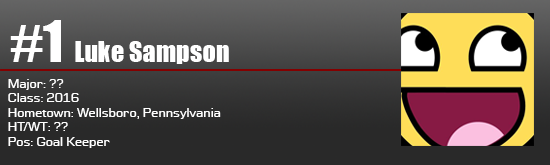
<style>
.page{position:relative;width:550px;height:165px}
.page>*{position:absolute;margin:0}
.t1{font:52.8px "Impact";color:#ffffff}
.t2{font:26.4px "Impact";color:#ffffff}
.t3{font:12px "Moire";color:#ffffff}
</style>
<div class="page">
<p class="t1" style="left:10px;top:20px;width:51px;height:42px">#1</p>
<p class="t2" style="left:75px;top:41px;width:154px;height:23px">Luke Sampson</p>
<p class="t3" style="left:8px;top:79px;width:213px;height:69px">Major: ??<br>Class: 2016<br>Hometown: Wellsboro, Pennsylvania<br>HT/WT: ??<br>Pos: Goal Keeper</p>
</div>
